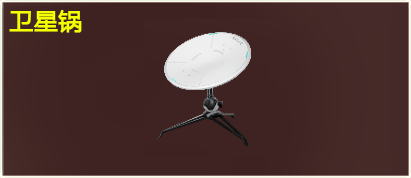
<style>
.page{position:relative;width:411px;height:178px}
.page>*{position:absolute;margin:0}
.t1{font:24px "MicrosoftYaHeiUI";color:#f4ff00;font-weight:bold}
</style>
<div class="page">
<p class="t1" style="left:9px;top:10px;width:73px;height:23px">卫星锅</p>
</div>
